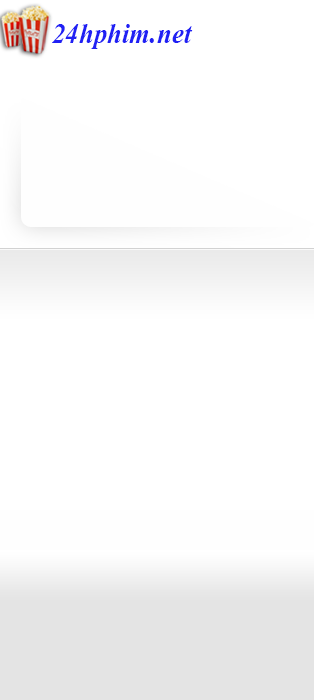
<style>
.page{position:relative;width:314px;height:700px;background:#ffffff}
.page>*{position:absolute;margin:0}
.t1{font:34.9px "Vijaya-Bold";color:#2020f4;scale:0.95 1}
</style>
<div class="page">
<p class="t1" style="left:52px;top:24px;width:141px;height:25px">24hphim.net</p>
</div>
